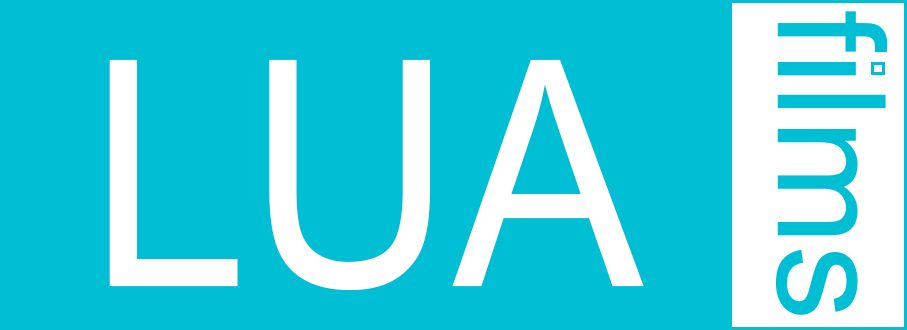
<style>
.page{position:relative;width:907px;height:330px;background:#00bed4}
.page>*{position:absolute;margin:0}
.t1{font:315.4px "ArialMT";color:#ffffff;scale:0.9 1}
</style>
<div class="page">
<p class="t1" style="left:109px;top:59px;width:535px;height:231px">LUA</p>
</div>
